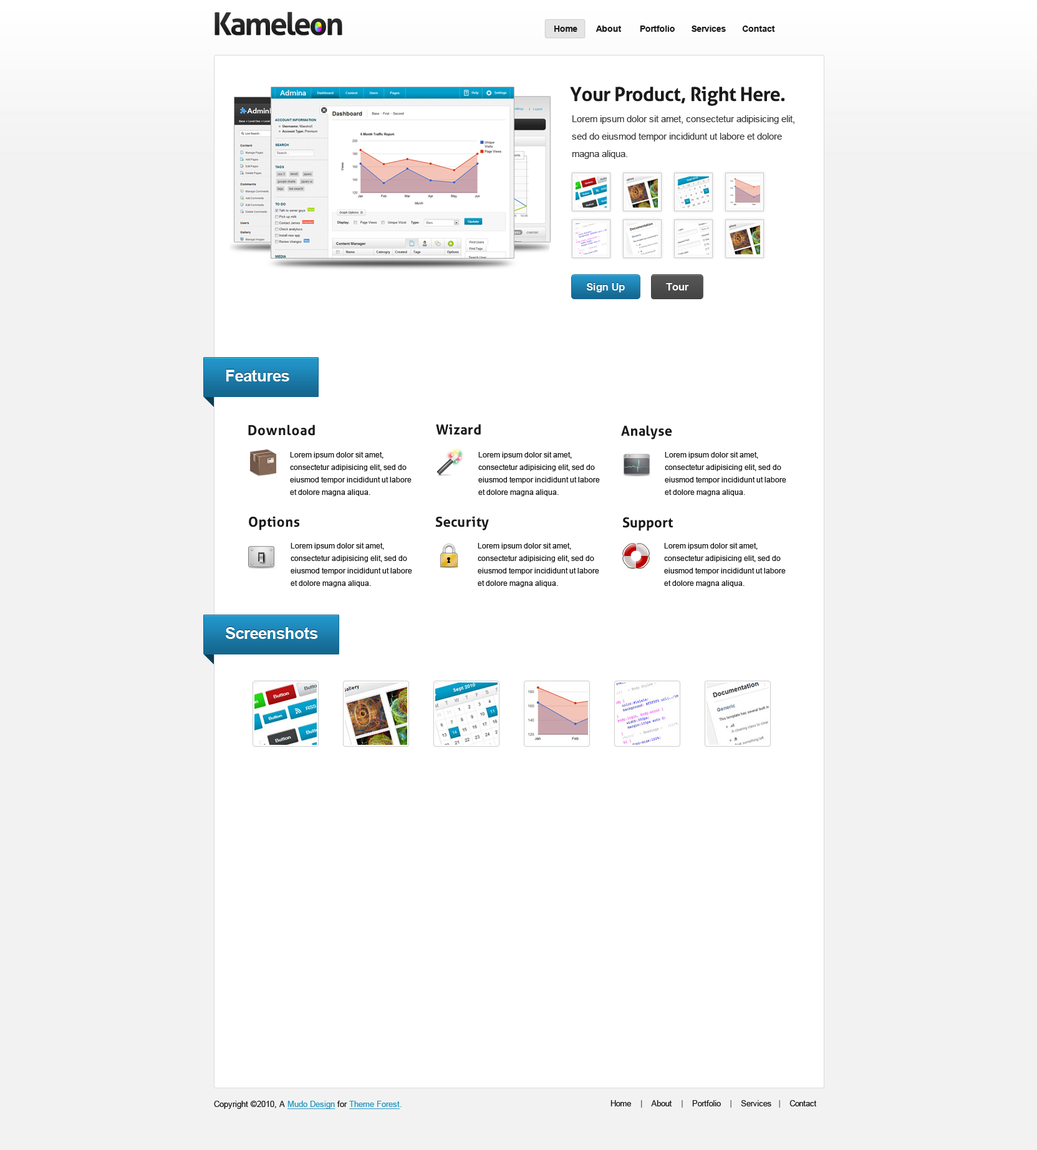
<style>
.page{position:relative;width:1037px;height:1150px;background:#ffffff}
.page>*{position:absolute;margin:0}
.t1{font:31.2px "Aller-Bold";letter-spacing:-0.06em;color:#262626}
.t2{font:8.7px "Arial-BoldMT";letter-spacing:-0.02em;color:#1a1a1a}
.t3{font:19.3px "Aller-Bold";letter-spacing:-0.02em;color:#1a1a1a}
.t4{font:9.4px/17.5px "ArialMT";color:#333333}
.t5{font:10.3px "Arial-BoldMT";color:#ffffff}
.t6{font:16.2px "Arial-BoldMT";letter-spacing:-0.02em;color:#ffffff}
.t7{font:13.7px "Aller-Bold";letter-spacing:0.04em;color:#191919}
.t8{font:13.7px "Aller-Bold";letter-spacing:0.02em;color:#191919}
.t9{font:7.5px/12.5px "ArialMT";color:#191919}
.t10{font:13.7px "Aller-Bold";color:#191919}
.t11{font:8.1px "ArialMT";color:#191919}
.t12{font:8.1px "ArialMT";color:#1d94c3;text-decoration:underline}
.t13{font:8.1px "ArialMT";color:#1d94c3}
.t14{font:8.1px "ArialMT";letter-spacing:-0.02em;color:#191919}
.t15{font:8.1px "ArialMT";letter-spacing:-0.02em;color:#666666}
</style>
<div class="page">
<p class="t1" style="left:214px;top:12px;width:128px;height:24px">Kameleon</p>
<p class="t2" style="left:554px;top:26px;width:221px;height:6px">Home        About        Portfolio       Services       Contact</p>
<p class="t3" style="left:570px;top:87px;width:214px;height:19px">Your Product, Right Here.</p>
<p class="t4" style="left:572px;top:115px;width:222px;height:44px">Lorem ipsum dolor sit amet, consectetur adipisicing elit, <br>sed do eiusmod tempor incididunt ut labore et dolore <br>magna aliqua.</p>
<p class="t5" style="left:586px;top:283px;width:39px;height:9px">Sign Up</p>
<p class="t5" style="left:666px;top:283px;width:23px;height:8px">Tour</p>
<p class="t6" style="left:226px;top:370px;width:63px;height:12px">Features</p>
<p class="t7" style="left:248px;top:425px;width:67px;height:11px">Download</p>
<p class="t8" style="left:436px;top:424px;width:45px;height:11px">Wizard</p>
<p class="t8" style="left:621px;top:425px;width:51px;height:15px">Analyse</p>
<p class="t9" style="left:290px;top:452px;width:121px;height:44px">Lorem ipsum dolor sit amet, <br>consectetur adipisicing elit, sed do <br>eiusmod tempor incididunt ut labore <br>et dolore magna aliqua.</p>
<p class="t9" style="left:478px;top:452px;width:122px;height:44px">Lorem ipsum dolor sit amet, <br>consectetur adipisicing elit, sed do <br>eiusmod tempor incididunt ut labore <br>et dolore magna aliqua.</p>
<p class="t9" style="left:665px;top:452px;width:121px;height:44px">Lorem ipsum dolor sit amet, <br>consectetur adipisicing elit, sed do <br>eiusmod tempor incididunt ut labore <br>et dolore magna aliqua.</p>
<p class="t8" style="left:249px;top:516px;width:50px;height:15px">Options</p>
<p class="t8" style="left:435px;top:516px;width:54px;height:15px">Security</p>
<p class="t10" style="left:622px;top:517px;width:51px;height:14px">Support</p>
<p class="t9" style="left:291px;top:543px;width:121px;height:44px">Lorem ipsum dolor sit amet, <br>consectetur adipisicing elit, sed do <br>eiusmod tempor incididunt ut labore <br>et dolore magna aliqua.</p>
<p class="t9" style="left:478px;top:543px;width:121px;height:44px">Lorem ipsum dolor sit amet, <br>consectetur adipisicing elit, sed do <br>eiusmod tempor incididunt ut labore <br>et dolore magna aliqua.</p>
<p class="t9" style="left:664px;top:543px;width:121px;height:44px">Lorem ipsum dolor sit amet, <br>consectetur adipisicing elit, sed do <br>eiusmod tempor incididunt ut labore <br>et dolore magna aliqua.</p>
<p class="t6" style="left:225px;top:627px;width:93px;height:12px">Screenshots</p>
<p class="t11" style="left:214px;top:1101px;width:187px;height:9px">Copyright ©2010, A <span class="t12">Mudo Design</span> for <span class="t12">Theme Forest</span><span class="t13">.</span></p>
<p class="t14" style="left:610px;top:1100px;width:207px;height:8px">Home<span class="t15">    |    </span>About    <span class="t15">|    </span>Portfolio    <span class="t15">|    </span>Services   <span class="t15">|    </span>Contact</p>
</div>
